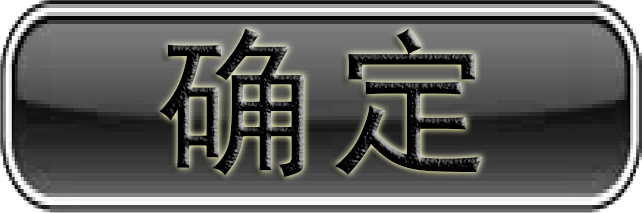
<style>
.page{position:relative;width:642px;height:213px}
.page>*{position:absolute;margin:0}
.t1{font:157.5px "SimHei";letter-spacing:0.075em;color:#000000;font-weight:bold}
</style>
<div class="page">
<p class="t1" style="left:159px;top:28px;width:324px;height:149px">确定</p>
</div>
